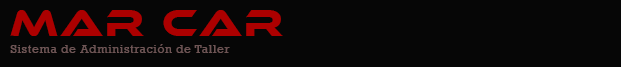
<style>
.page{position:relative;width:621px;height:67px;background:#060606}
.page>*{position:absolute;margin:0}
.t1{font:38px "EthnocentricRg-Regular";letter-spacing:0.05em;color:#ac0000}
.t2{font:12px "Rockwell";letter-spacing:0.05em;color:#6e5555}
</style>
<div class="page">
<p class="t1" style="left:10px;top:10px;width:273px;height:26px">mar car</p>
<p class="t2" style="left:10px;top:44px;width:220px;height:9px">Sistema de Administración de Taller</p>
</div>
